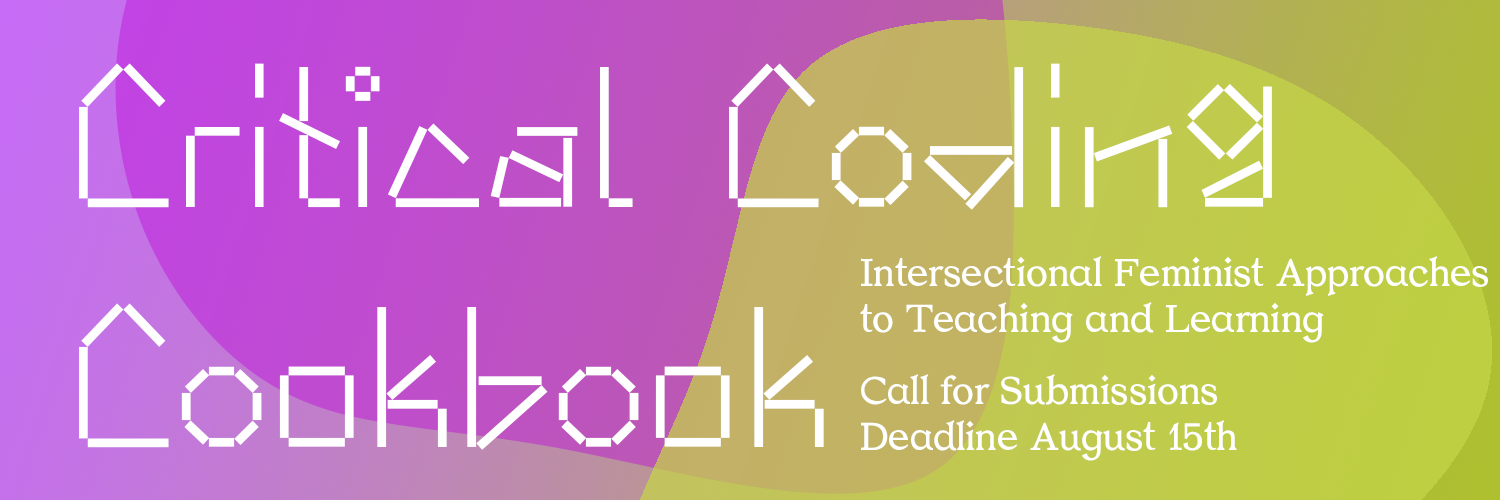
<style>
.page{position:relative;width:1500px;height:500px}
.page>*{position:absolute;margin:0}
.t1{font:200px "Anthony";color:#ffffff}
.t2{font:38.8px "Zarathustra";color:#ffffff}
.t3{font:38.8px/25px "Zarathustra";color:#ffffff}
</style>
<div class="page">
<p class="t1" style="left:79px;top:63px;width:1193px;height:387px">Critical Coding<br>Cookbook</p>
<p class="t2" style="left:860px;top:256px;width:628px;height:205px">Intersectional Feminist Approaches<br>to Teaching and Learning<br><span class="t3"><br>Call for Submissions</span> <br>Deadline August 15th</p>
</div>
